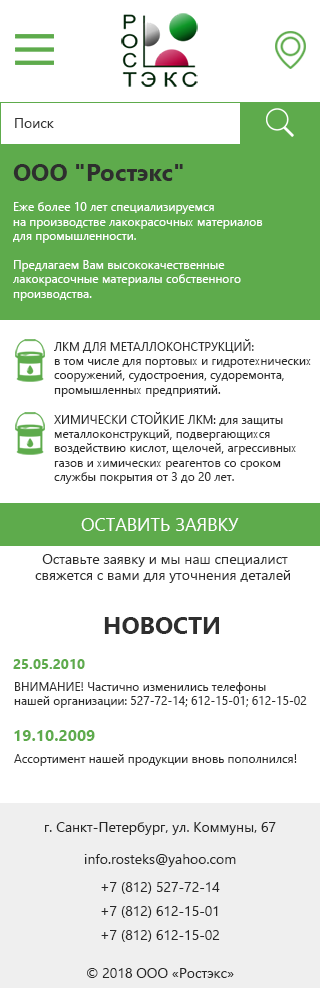
<style>
.page{position:relative;width:320px;height:988px;background:#ffffff}
.page>*{position:absolute;margin:0}
.t1{font:14px "SegoeUI";color:#333333}
.t2{font:12px "SegoeUI";color:#ffffff}
.t3{font:24px "SegoeUI-Bold";color:#2e2e2e}
.t4{font:12px "SegoeUI";color:#2e2e2e}
.t5{font:18px "SegoeUI";color:#ffffff}
.t6{font:14px "SegoeUI";color:#2e2e2e}
.t7{font:14px "SegoeUI-Bold";color:#5eab4c}
.t8{font:16px "SegoeUI-Bold";color:#5eab4c}
.t9{font:14px "SegoeUI";color:#282828}
.t10{font:14px/24px "SegoeUI";color:#282828}
</style>
<div class="page">
<p class="t1" style="left:15px;top:118px;width:39px;height:10px">Поиск</p>
<p class="t2" style="left:13px;top:164px;width:250px;height:137px"><span class="t3">ООО "Ростэкс"<br><br></span>Eже более 10 лет специализируемся<br>на производстве лакокрасочных материалов<br>для промышленности.<br><br>Предлагаем Вам высококачественные<br>лакокрасочные материалы собственного<br>производства.</p>
<p class="t4" style="left:54px;top:339px;width:257px;height:58px">ЛКМ ДЛЯ МЕТАЛЛОКОНСТРУКЦИЙ:<br>в том числе для портовых и гидротехнических<br>сооружений, судостроения, судоремонта,<br>промышленных предприятий.</p>
<p class="t4" style="left:54px;top:412px;width:242px;height:72px">ХИМИЧЕСКИ СТОЙКИЕ ЛКМ: для защиты<br>металлоконструкций, подвергающихся<br>воздействию кислот, щелочей, агрессивных<br>газов и химических реагентов со сроком<br>службы покрытия от 3 до 20 лет.</p>
<p class="t5" style="left:81px;top:518px;width:158px;height:13px">ОСТАВИТЬ ЗАЯВКУ</p>
<p class="t6" style="left:35px;top:554px;width:255px;height:29px;text-align:center">Оставьте заявку и мы наш специалист<br>свяжется с вами для уточнения деталей</p>
<p class="t3" style="left:104px;top:617px;width:115px;height:17px">НОВОСТИ</p>
<p class="t7" style="left:13px;top:659px;width:72px;height:10px">25.05.2010</p>
<p class="t4" style="left:14px;top:682px;width:293px;height:26px">ВНИМАНИЕ! Частично изменились телефоны<br>нашей организации: 527-72-14; 612-15-01; 612-15-02</p>
<p class="t8" style="left:14px;top:730px;width:81px;height:11px">19.10.2009</p>
<p class="t4" style="left:14px;top:754px;width:283px;height:12px">Ассортимент нашей продукции вновь пополнился!</p>
<p class="t9" style="left:45px;top:822px;width:231px;height:13px">г. Санкт-Петербург, ул. Коммуны, 67</p>
<p class="t9" style="left:84px;top:854px;width:152px;height:13px">info.rosteks@yahoo.com</p>
<p class="t10" style="left:101px;top:882px;width:119px;height:60px">+7 (812) 527-72-14 <br>+7 (812) 612-15-01 <br>+7 (812) 612-15-02</p>
<p class="t9" style="left:87px;top:968px;width:147px;height:10px">© 2018 ООО «Ростэкс»</p>
</div>
